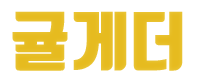
<style>
.page{position:relative;width:200px;height:80px;background:#ffffff}
.page>*{position:absolute;margin:0}
.t1{font:64px "TmonMonsoriBlack";letter-spacing:0.1em;color:#e6bb1f}
</style>
<div class="page">
<p class="t1" style="left:12px;top:11px;width:171px;height:60px">귤게더</p>
</div>
